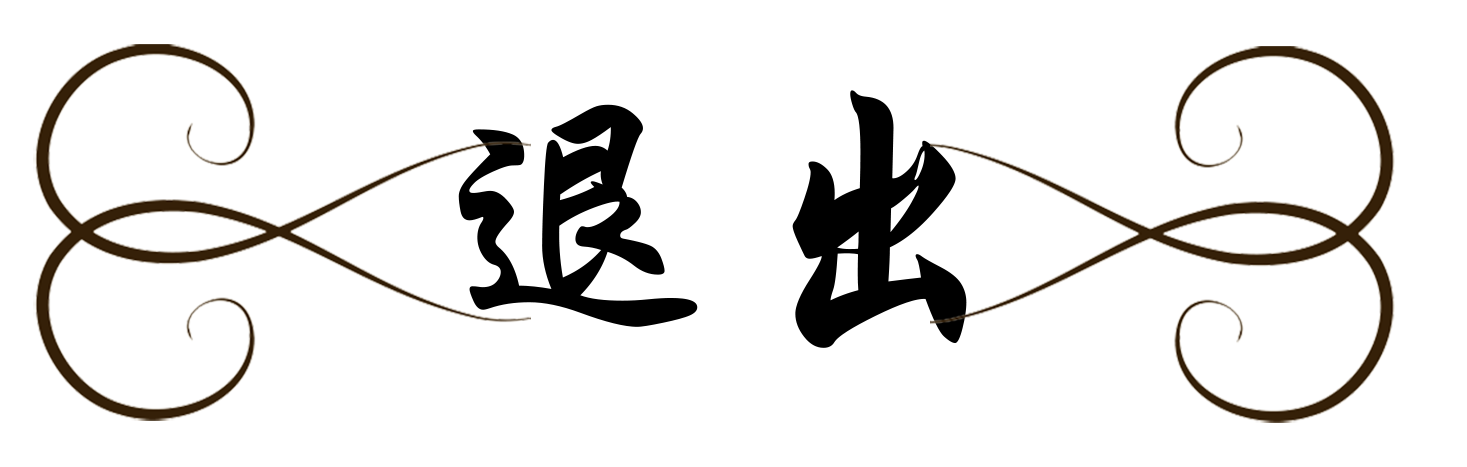
<style>
.page{position:relative;width:1467px;height:467px;background:#ffffff}
.page>*{position:absolute;margin:0}
.t1{font:300px "STXingkai";color:#000000}
</style>
<div class="page">
<p class="t1" style="left:458px;top:90px;width:509px;height:258px">退出</p>
</div>
